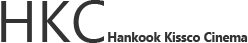
<style>
.page{position:relative;width:248px;height:43px;background:#ffffff}
.page>*{position:absolute;margin:0}
.t1{font:12.5px "KhmerUI-Bold";color:#333333}
.t2{font:58.3px "SegoeUI";color:#333333}
</style>
<div class="page">
<p class="t1" style="left:1px;top:0px;width:247px;height:43px"><span class="t2">HKC</span>Hankook Kissco Cinema</p>
</div>
